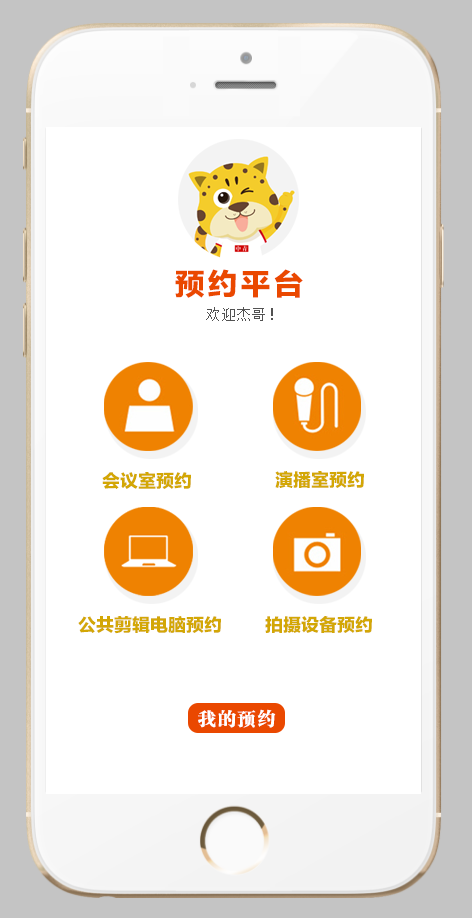
<style>
.page{position:relative;width:472px;height:918px;background:#ffffff}
.page>*{position:absolute;margin:0}
.t1{font:30px "FZLTTHJW--GB1-0";letter-spacing:0.1em;color:#ea4800}
.t2{font:14px "SimSun";letter-spacing:0.1em;color:#525252}
.t3{font:18px "FZLTTHJW--GB1-0";color:#d3a705}
.t4{font:18px "Jcusong";letter-spacing:0.1em;color:#ffffff}
</style>
<div class="page">
<p class="t1" style="left:175px;top:269px;width:128px;height:29px">预约平台</p>
<p class="t2" style="left:206px;top:307px;width:67px;height:14px">欢迎杰哥！</p>
<p class="t3" style="left:102px;top:472px;width:89px;height:17px">会议室预约</p>
<p class="t3" style="left:275px;top:471px;width:89px;height:17px">演播室预约</p>
<p class="t3" style="left:78px;top:616px;width:143px;height:18px">公共剪辑电脑预约</p>
<p class="t3" style="left:265px;top:616px;width:107px;height:17px">拍摄设备预约</p>
<p class="t4" style="left:198px;top:709px;width:78px;height:19px">我的预约</p>
</div>
